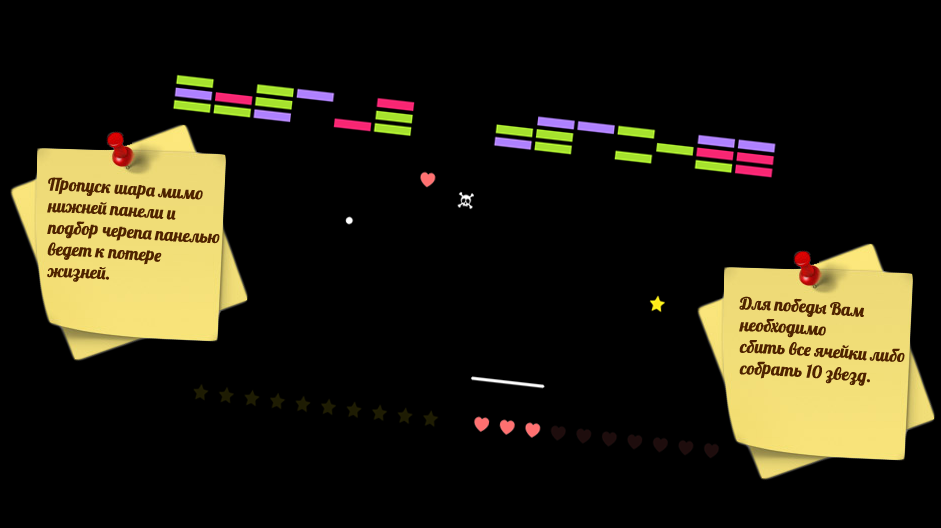
<style>
.page{position:relative;width:941px;height:528px;background:#000000}
.page>*{position:absolute;margin:0}
.t1{font:18px "Lobster-Regular";color:#4f2300}
</style>
<div class="page">
<p class="t1" style="left:47px;top:177px;width:173px;height:105px">Пропуск шара мимо нижней панели и подбор черепа панелью ведет к потере жизней.</p>
<p class="t1" style="left:739px;top:296px;width:166px;height:90px">Для победы Вам необходимо <br>сбить все ячейки либо собрать 10 звезд.</p>
</div>
